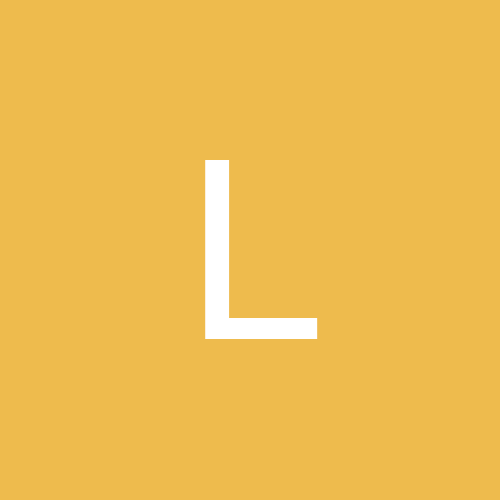
<style>
.page{position:relative;width:500px;height:500px;background:#eebb4d}
.page>*{position:absolute;margin:0}
.t1{font:250px "ArialMT";color:#ffffff}
</style>
<div class="page">
<p class="t1" style="left:205px;top:160px;width:113px;height:179px">L</p>
</div>
